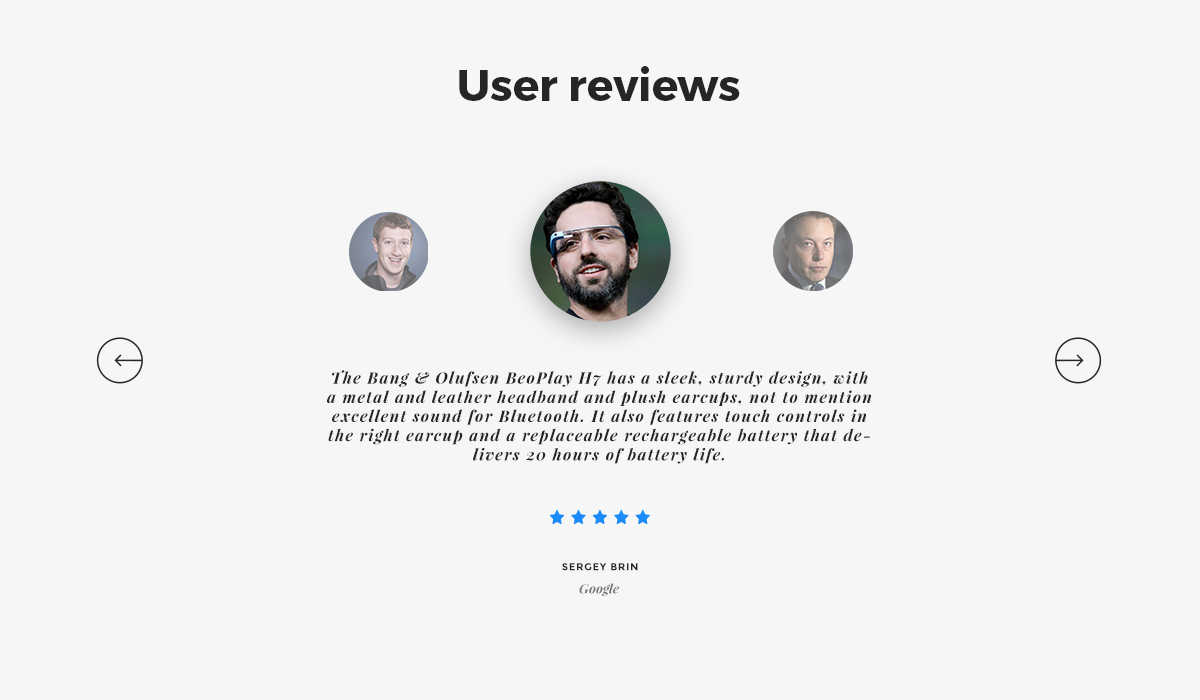
<style>
.page{position:relative;width:1200px;height:700px;background:#f6f6f6}
.page>*{position:absolute;margin:0}
.t1{font:44px "Montserrat-Bold";color:#242526}
.t2{font:16px "PlayfairDisplay-BoldItalic";letter-spacing:0.08em;color:#242526}
.t3{font:10px "Montserrat-Bold";letter-spacing:0.08em;color:#242526;text-transform:uppercase}
.t4{font:13px "PlayfairDisplay-BoldItalic";color:#747474}
</style>
<div class="page">
<p class="t1" style="left:459px;top:66px;width:281px;height:35px">User reviews</p>
<p class="t2" style="left:327px;top:370px;width:544px;height:94px;text-align:center">The Bang &amp; Olufsen BeoPlay H7 has a sleek, sturdy design, with a metal and leather headband and plush earcups, not to mention excellent sound for Bluetooth. It also features touch controls in the right earcup and a replaceable rechargeable battery that delivers 20 hours of battery life.</p>
<p class="t3" style="left:562px;top:563px;width:76px;height:8px">sergey brin</p>
<p class="t4" style="left:579px;top:583px;width:40px;height:13px">Google</p>
</div>
